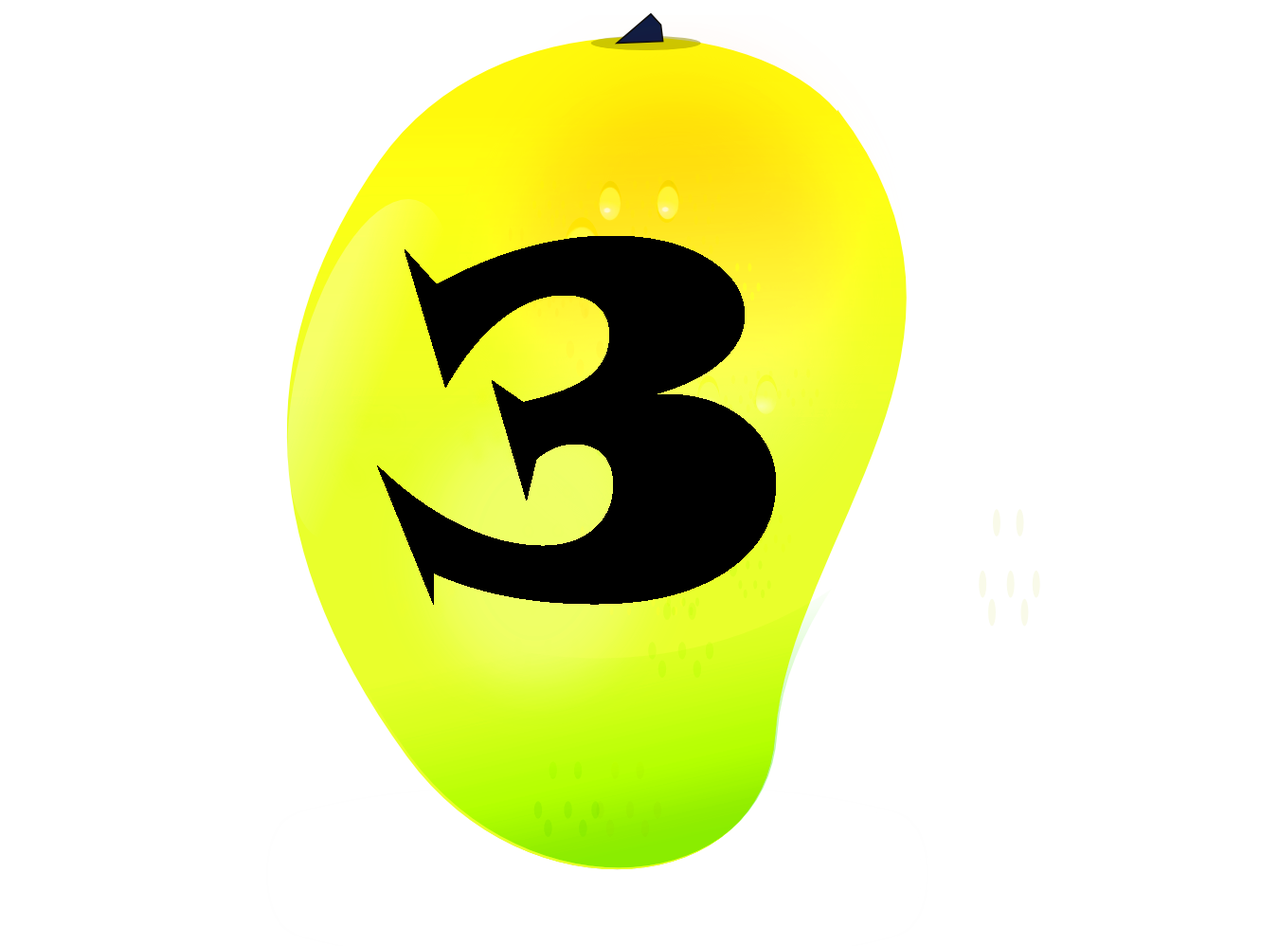
<style>
.page{position:relative;width:1261px;height:946px;background:#ffffff}
.page>*{position:absolute;margin:0}
.t1{font:492.6px "SnapITC-Regular";color:#000000}
</style>
<div class="page">
<p class="t1" style="left:377px;top:236px;width:399px;height:368px">3</p>
</div>
